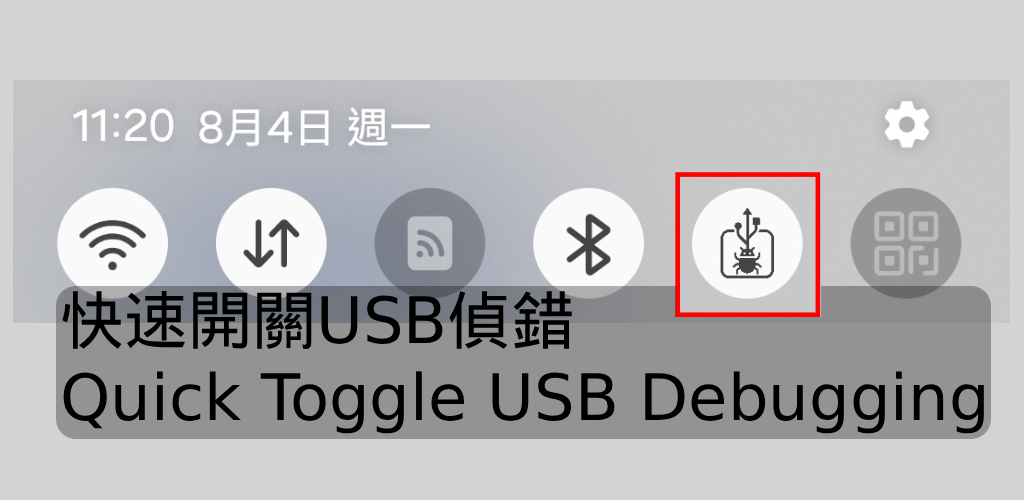
<style>
.page{position:relative;width:1024px;height:500px;background:#d3d3d3}
.page>*{position:absolute;margin:0}
.t1{font:64px "DejaVuSans";color:#000000}
.t2{font:64px "DroidSansFallback";color:#000000}
</style>
<div class="page">
<p class="t1" style="left:62px;top:291px;width:922px;height:143px"><span class="t2">快速開關</span>USB<span class="t2">偵錯<br></span>Quick Toggle USB Debugging</p>
</div>
